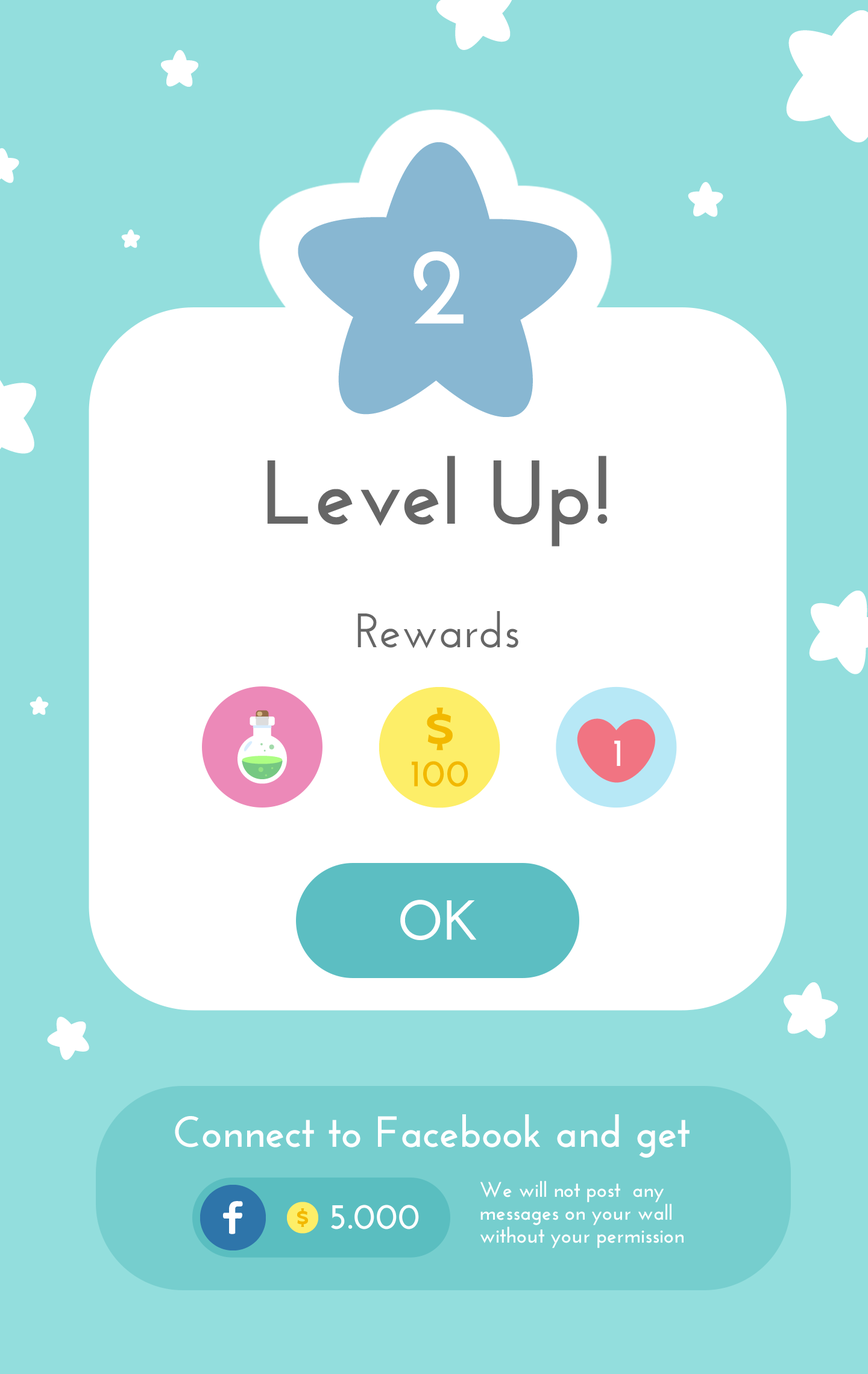
<style>
.page{position:relative;width:868px;height:1374px;background:#93dedd}
.page>*{position:absolute;margin:0}
.t1{font:109.3px "JosefinSans-Bold";color:#ffffff}
.t2{font:90.4px "JosefinSans-Bold";color:#666666}
.t3{font:48.2px "JosefinSans-SemiBold";color:#666666}
.t4{font:39px "JosefinSans-Bold";color:#ffffff}
.t5{font:37.5px "JosefinSans-Bold";color:#f2b800;font-weight:bold}
.t6{font:56.1px "JosefinSans-Bold";color:#ffffff}
.t7{font:43.4px "JosefinSans-Bold";color:#ffffff}
.t8{font:21.1px/22.8px "JosefinSans-Bold";color:#ffffff}
.t9{font:36.2px "JosefinSans-Bold";color:#ffffff}
</style>
<div class="page">
<p class="t1" style="left:413px;top:251px;width:50px;height:73px">2</p>
<p class="t2" style="left:267px;top:456px;width:340px;height:91px">Level Up!</p>
<p class="t3" style="left:357px;top:611px;width:161px;height:37px">Rewards</p>
<p class="t4" style="left:614px;top:741px;width:6px;height:25px">1</p>
<p class="t5" style="left:412px;top:761px;width:56px;height:26px">100</p>
<p class="t6" style="left:400px;top:900px;width:77px;height:40px">OK</p>
<p class="t7" style="left:175px;top:1114px;width:514px;height:44px">Connect to Facebook and get</p>
<p class="t8" style="left:480px;top:1181px;width:203px;height:67px">We will not post  any messages on your wall  without your permission</p>
<p class="t9" style="left:331px;top:1205px;width:88px;height:24px">5.000</p>
</div>
